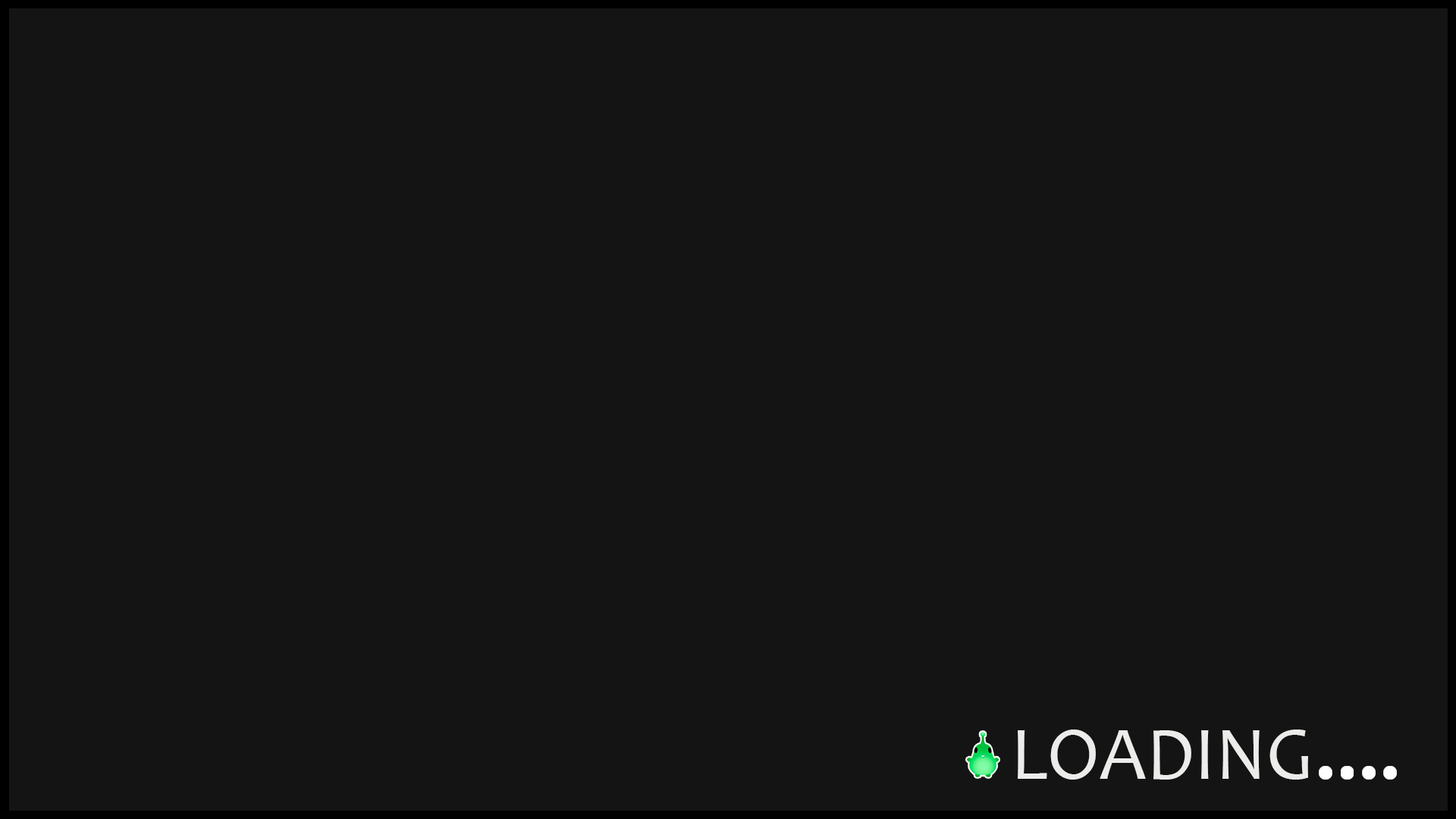
<style>
.page{position:relative;width:1456px;height:819px;background:#141414}
.page>*{position:absolute;margin:0}
.t1{font:75.8px "Candara";color:#ecedea}
</style>
<div class="page">
<p class="t1" style="left:1018px;top:730px;width:290px;height:50px">LOADING</p>
</div>
